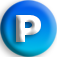
<style>
.page{position:relative;width:57px;height:57px}
.page>*{position:absolute;margin:0}
.t1{font:38.4px "Montserrat-Black"}
</style>
<div class="page">
<p class="t1" style="left:16px;top:15px;width:25px;height:27px">P</p>
</div>
